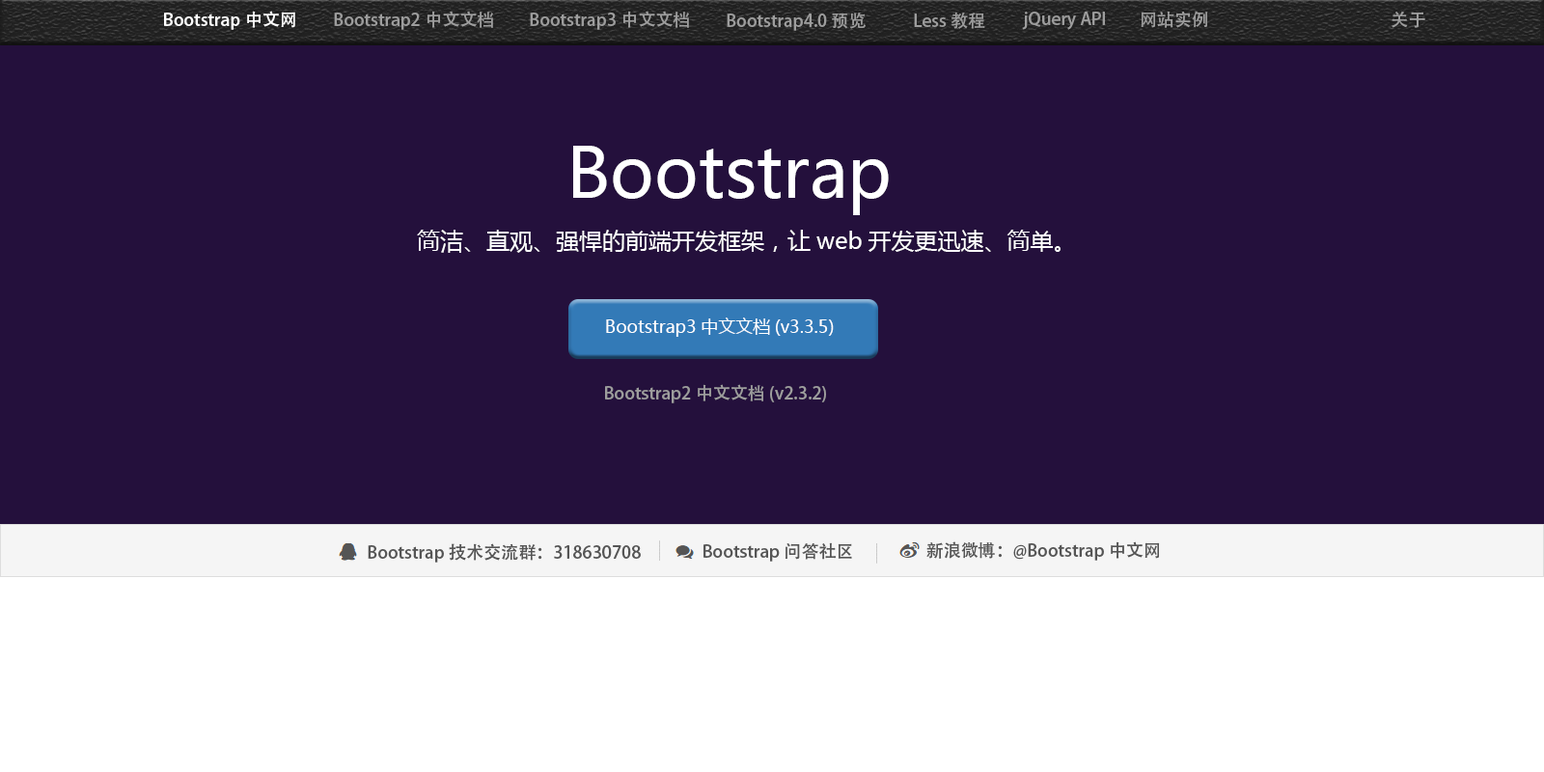
<style>
.page{position:relative;width:1544px;height:772px;background:#24103c}
.page>*{position:absolute;margin:0}
.t1{font:17.4px "AdobeHeitiStd-Regular";color:#ffffff}
.t2{font:17.4px "AdobeHeitiStd-Regular";color:#9d9d9d}
.t3{font:69.5px "MicrosoftYaHei";color:#ffffff}
.t4{font:23.2px "MicrosoftYaHei";color:#ffffff}
.t5{font:17.4px "MicrosoftYaHei";color:#ffffff}
</style>
<div class="page">
<p class="t1" style="left:164px;top:11px;width:131px;height:19px">Bootstrap中文网</p>
<p class="t2" style="left:334px;top:11px;width:159px;height:19px">Bootstrap2中文文档</p>
<p class="t2" style="left:530px;top:11px;width:159px;height:19px">Bootstrap3中文文档</p>
<p class="t2" style="left:727px;top:13px;width:139px;height:18px">Bootstrap4.0预览</p>
<p class="t2" style="left:914px;top:12px;width:71px;height:17px">Less教程</p>
<p class="t2" style="left:1022px;top:12px;width:83px;height:18px">jQuery API</p>
<p class="t2" style="left:1141px;top:11px;width:67px;height:17px">网站实例</p>
<p class="t2" style="left:1392px;top:11px;width:34px;height:17px">关于</p>
<p class="t3" style="left:573px;top:146px;width:316px;height:69px">Bootstrap</p>
<p class="t4" style="left:417px;top:230px;width:644px;height:23px">简洁、直观、强悍的前端开发框架，让web开发更迅速、简单。</p>
<p class="t5" style="left:606px;top:318px;width:228px;height:19px">Bootstrap3中文文档(v3.3.5)</p>
<p class="t2" style="left:605px;top:384px;width:221px;height:19px">Bootstrap2中文文档(v2.3.2)</p>
</div>
